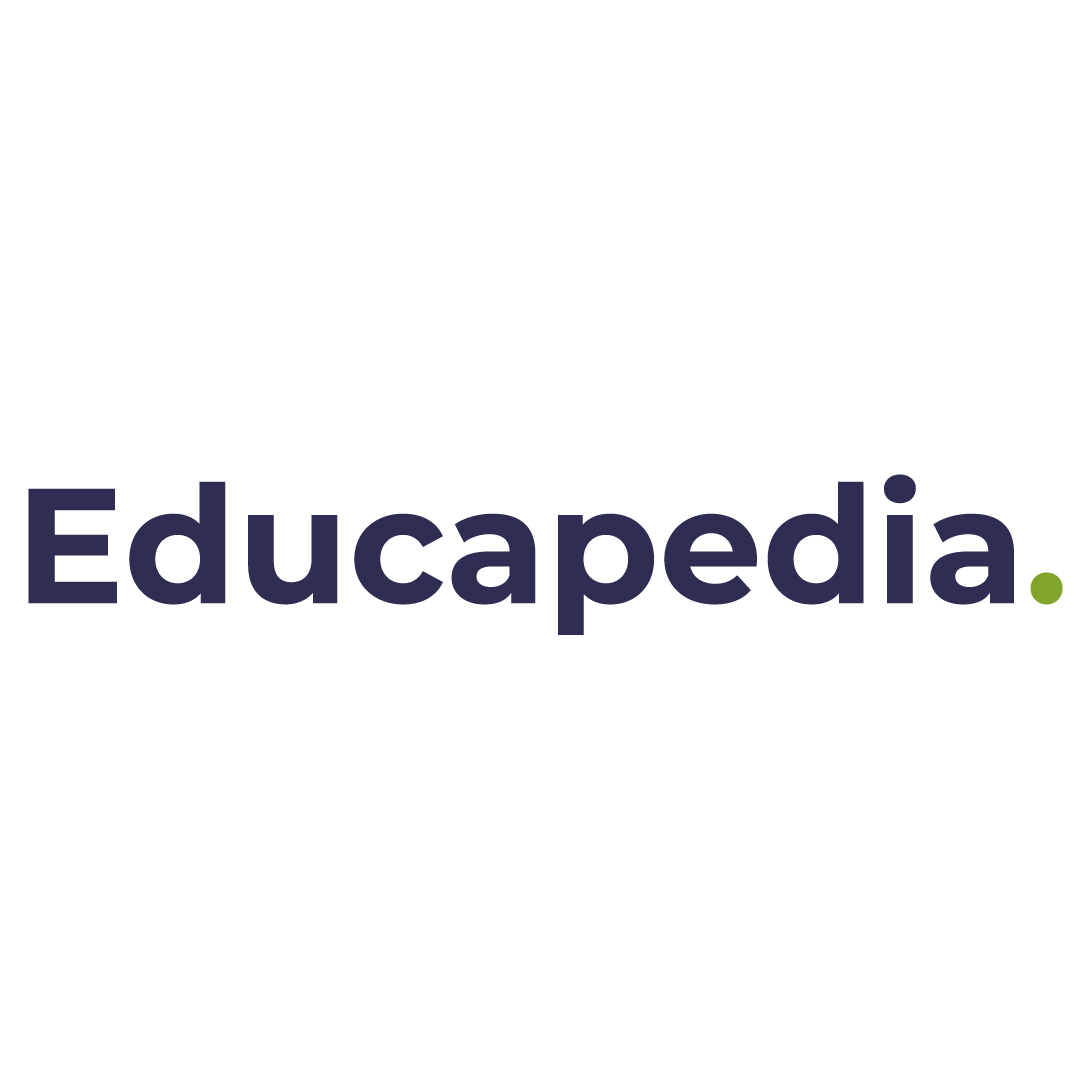
<style>
.page{position:relative;width:1080px;height:1080px;background:#ffffff}
.page>*{position:absolute;margin:0}
.t1{font:163.3px "Montserrat-Bold";color:#2f2d52}
.t2{font:163.3px "Montserrat-Bold";color:#81a42c}
</style>
<div class="page">
<p class="t1" style="left:28px;top:474px;width:1035px;height:161px">Educapedia<span class="t2">.</span></p>
</div>
